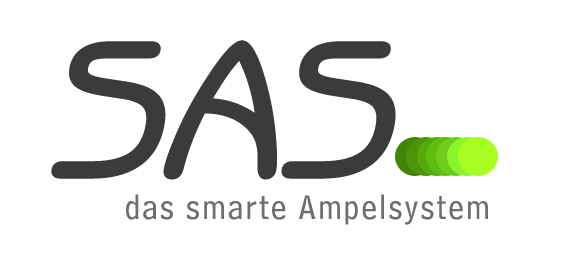
<style>
.page{position:relative;width:563px;height:264px;background:#ffffff}
.page>*{position:absolute;margin:0}
.t1{font:194.5px "BenguiatGothicITCbyBT-Book";letter-spacing:-0.025em;color:#3b3c3a;font-weight:bold;font-style:italic}
.t2{font:35.8px "BellCentennialBT-Address";letter-spacing:0.05em;color:#6d6f6c}
</style>
<div class="page">
<p class="t1" style="left:51px;top:40px;width:345px;height:140px">SAS</p>
<p class="t2" style="left:126px;top:194px;width:362px;height:31px">das smarte Ampelsystem</p>
</div>
